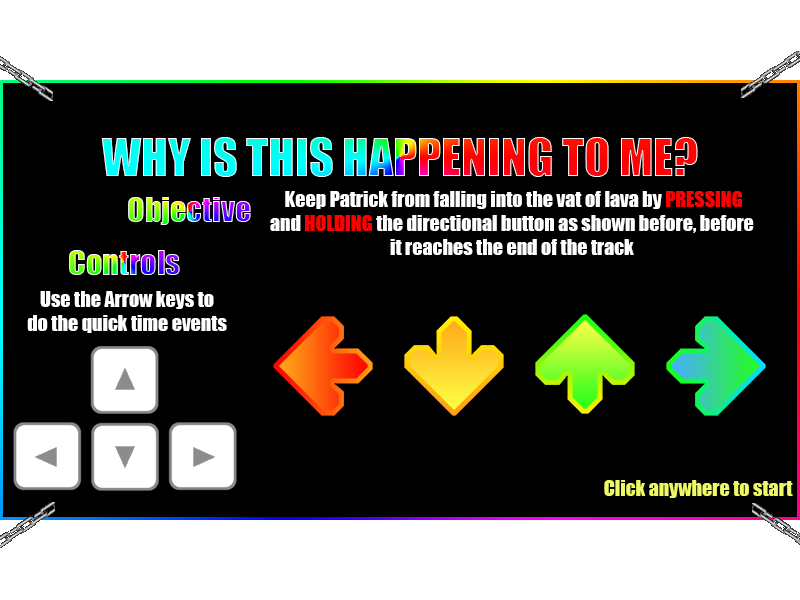
<style>
.page{position:relative;width:800px;height:600px;background:#000000}
.page>*{position:absolute;margin:0}
.t1{font:48px "Impact"}
.t2{font:32px "Impact"}
.t3{font:20px "Impact";color:#ffffff}
.t4{font:20px "Impact";color:#ff0000}
.t5{font:20px "Impact";color:#eefa65}
</style>
<div class="page">
<p class="t1" style="left:101px;top:137px;width:597px;height:40px">WHY IS THIS HAPPENING TO ME?</p>
<p class="t2" style="left:128px;top:197px;width:123px;height:28px">Objective</p>
<p class="t3" style="left:270px;top:191px;width:484px;height:64px;text-align:center">Keep Patrick from falling into the vat of lava by <span class="t4">PRESSING<br></span>and <span class="t4">HOLDING</span> the directional button as shown before, before<br>it reaches the end of the track</p>
<p class="t2" style="left:69px;top:250px;width:111px;height:25px">Controls</p>
<p class="t3" style="left:27px;top:291px;width:200px;height:42px;text-align:center">Use the Arrow keys to<br>do the quick time events</p>
<p class="t5" style="left:604px;top:480px;width:189px;height:18px">Click anywhere to start</p>
</div>
